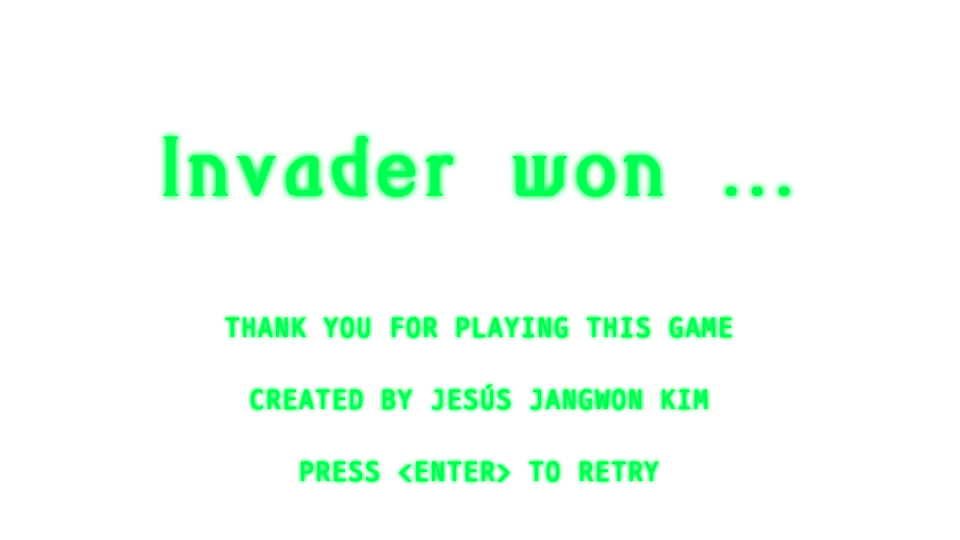
<style>
.page{position:relative;width:960px;height:540px;background:#ffffff}
.page>*{position:absolute;margin:0}
.t1{font:100px "AmiR-HM";letter-spacing:0.06em;color:#00ff50;font-weight:bold}
.t2{font:28px/72px "D2Coding";letter-spacing:0.06em;color:#00ff50;font-weight:bold}
</style>
<div class="page">
<p class="t1" style="left:163px;top:136px;width:627px;height:61px">Invader won ...</p>
<p class="t2" style="left:225px;top:317px;width:507px;height:165px;text-align:center">THANK YOU FOR PLAYING THIS GAME<br>CREATED BY JESÚS JANGWON KIM<br>PRESS &lt;ENTER&gt; TO RETRY</p>
</div>
